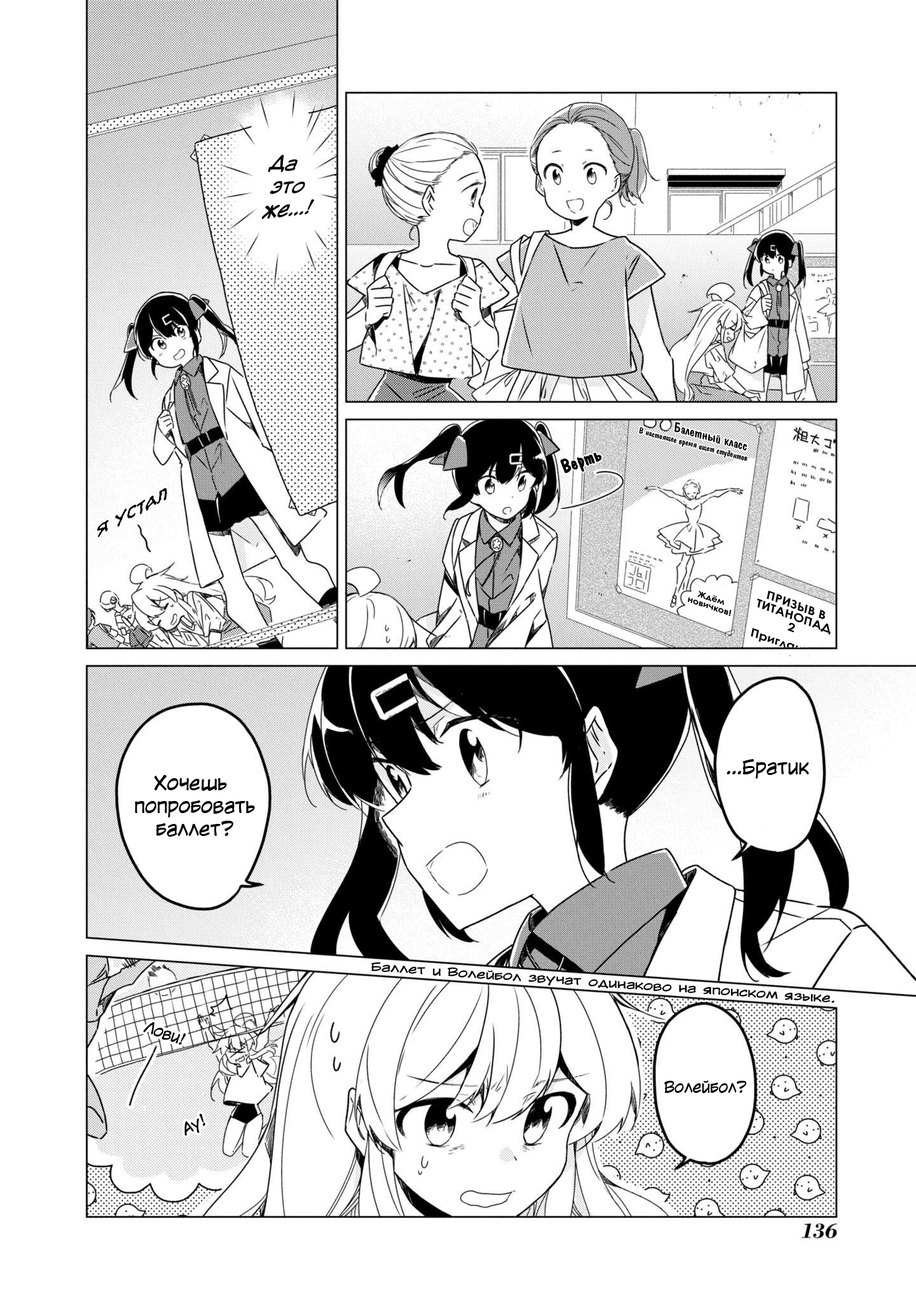
<style>
.page{position:relative;width:916px;height:1302px;background:#ffffff}
.page>*{position:absolute;margin:0}
.t1{font:19.1px "KuraiVoice2-Italic";color:#000000}
.t2{font:13.3px "ADomIno";color:#000000;scale:1.06 1}
.t3{font:8.5px "ADomIno";color:#000000;scale:1.03 1}
.t4{font:19.1px "ADomIno";color:#000000;font-weight:bold;scale:0.94 1}
.t5{font:19.1px "el_CCEvilSchemes";color:#000000;scale:1.12 1}
.t6{font:8.1px/8.1px "CenturyGothic-Bold";color:#000000;scale:1.15 1}
.t7{font:11.4px/11.4px "CenturyGothic-Bold";color:#000000;scale:1.16 1}
.t8{font:19.1px "KuraiVoice2";color:#000000}
.t9{font:11.3px "KuraiVoice2";color:#000000;scale:1.38 1}
.t10{font:15.3px "KuraiVoice2";color:#000000}
</style>
<div class="page">
<p class="t1" style="left:262px;top:154px;width:53px;height:65px;text-align:center">Да <br>это<br>же...!</p>
<p class="t2" style="left:674px;top:422px;width:73px;height:29px;rotate:15deg">Балетный класс</p>
<p class="t3" style="left:639px;top:427px;width:109px;height:34px;rotate:14deg">В настоящее время ищет студентов</p>
<p class="t4" style="left:560px;top:453px;width:42px;height:20px;rotate:-20deg">Верть</p>
<p class="t5" style="left:97px;top:488px;width:70px;height:49px;rotate:-29deg">Я устал</p>
<p class="t6" style="left:688px;top:591px;width:44px;height:25px;text-align:center;rotate:19deg">Ждём<br>новичков!</p>
<p class="t7" style="left:757px;top:591px;width:74px;height:44px;text-align:center;rotate:20deg">ПРИЗЫВ В<br>ТИТАНОПАД<br>2</p>
<p class="t8" style="left:727px;top:759px;width:82px;height:20px">...Братик</p>
<p class="t8" style="left:135px;top:775px;width:120px;height:62px;text-align:center">Хочешь <br>попробовать<br> баллет?</p>
<p class="t9" style="left:371px;top:962px;width:464px;height:41px;rotate:4deg">Баллет и Волейбол звучат одинаково на японском языке.</p>
<p class="t10" style="left:143px;top:1021px;width:43px;height:24px;rotate:20deg">Лови!</p>
<p class="t10" style="left:664px;top:1080px;width:83px;height:13px">Волейбол?</p>
<p class="t10" style="left:184px;top:1114px;width:21px;height:22px;rotate:-26deg">Ау!</p>
</div>
